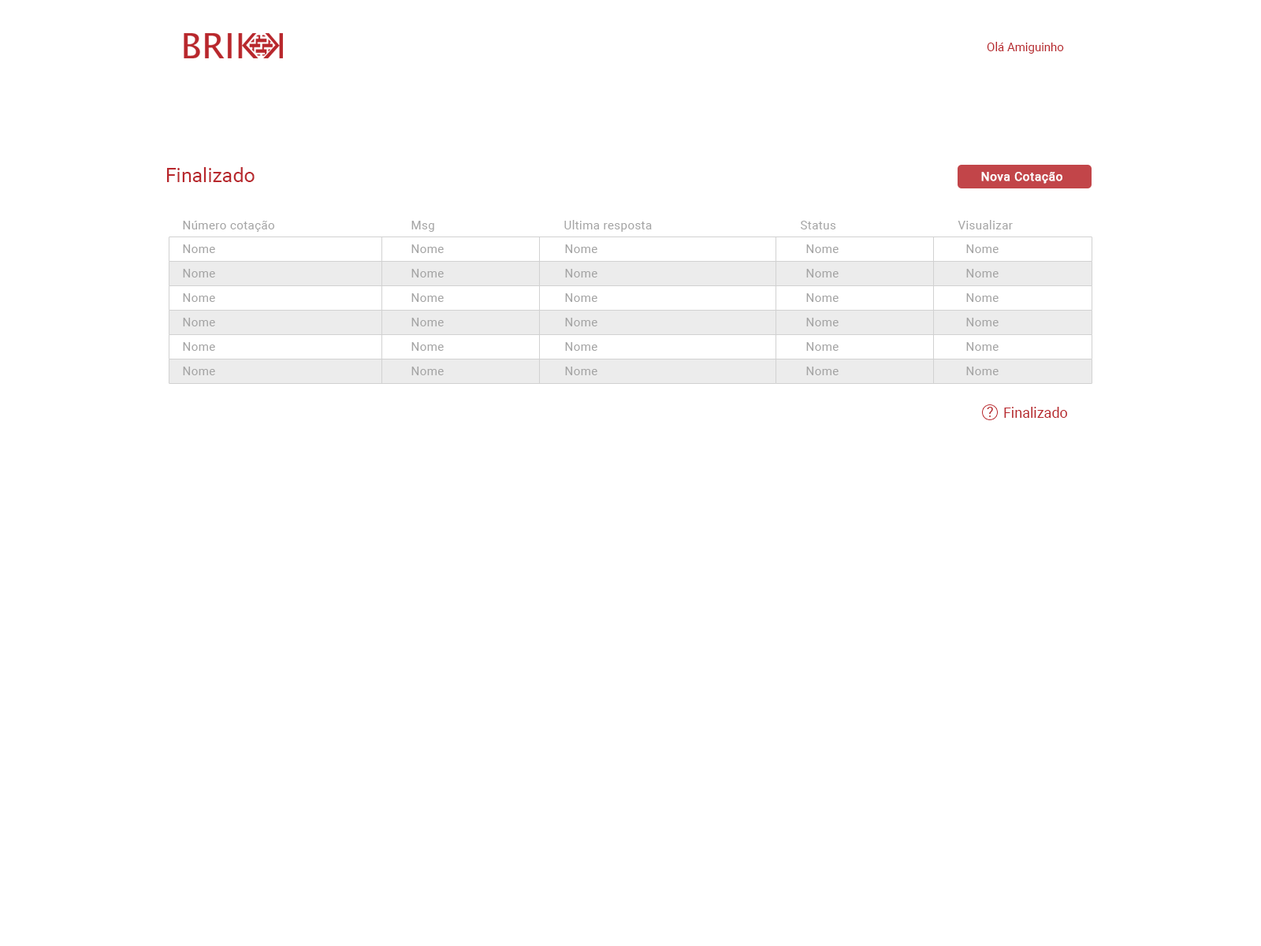
<style>
.page{position:relative;width:1261px;height:946px;background:#ffffff}
.page>*{position:absolute;margin:0}
.t1{font:11.8px "Roboto-Regular";color:#b8272c}
.t2{font:19.7px "Roboto-Regular";color:#b8272c}
.t3{font:11.8px "Roboto-Regular";letter-spacing:0.03em;color:#ffffff;font-weight:bold}
.t4{font:11.8px "Roboto-Regular";letter-spacing:0.03em;color:#a4a4a4}
.t5{font:14.2px "Roboto-Regular";color:#b8272c}
</style>
<div class="page">
<p class="t1" style="left:987px;top:42px;width:77px;height:12px">Olá Amiguinho</p>
<p class="t2" style="left:167px;top:167px;width:88px;height:15px">Finalizado</p>
<p class="t3" style="left:981px;top:172px;width:81px;height:12px">Nova Cotação</p>
<p class="t4" style="left:183px;top:221px;width:91px;height:11px">Número cotação</p>
<p class="t4" style="left:411px;top:221px;width:23px;height:11px">Msg</p>
<p class="t4" style="left:564px;top:220px;width:88px;height:12px">Ultima resposta</p>
<p class="t4" style="left:801px;top:221px;width:35px;height:8px">Status</p>
<p class="t4" style="left:958px;top:220px;width:55px;height:9px">Visualizar</p>
<p class="t4" style="left:183px;top:244px;width:32px;height:9px">Nome</p>
<p class="t4" style="left:411px;top:244px;width:33px;height:9px">Nome</p>
<p class="t4" style="left:565px;top:244px;width:32px;height:9px">Nome</p>
<p class="t4" style="left:806px;top:244px;width:33px;height:9px">Nome</p>
<p class="t4" style="left:966px;top:244px;width:32px;height:9px">Nome</p>
<p class="t4" style="left:183px;top:269px;width:32px;height:8px">Nome</p>
<p class="t4" style="left:411px;top:269px;width:33px;height:8px">Nome</p>
<p class="t4" style="left:565px;top:269px;width:32px;height:8px">Nome</p>
<p class="t4" style="left:806px;top:269px;width:33px;height:8px">Nome</p>
<p class="t4" style="left:966px;top:269px;width:32px;height:8px">Nome</p>
<p class="t4" style="left:183px;top:293px;width:32px;height:9px">Nome</p>
<p class="t4" style="left:411px;top:293px;width:33px;height:9px">Nome</p>
<p class="t4" style="left:565px;top:293px;width:32px;height:9px">Nome</p>
<p class="t4" style="left:806px;top:293px;width:33px;height:9px">Nome</p>
<p class="t4" style="left:966px;top:293px;width:32px;height:9px">Nome</p>
<p class="t4" style="left:183px;top:318px;width:32px;height:8px">Nome</p>
<p class="t4" style="left:411px;top:318px;width:33px;height:8px">Nome</p>
<p class="t4" style="left:565px;top:318px;width:32px;height:8px">Nome</p>
<p class="t4" style="left:806px;top:318px;width:33px;height:8px">Nome</p>
<p class="t4" style="left:966px;top:318px;width:32px;height:8px">Nome</p>
<p class="t4" style="left:183px;top:342px;width:32px;height:9px">Nome</p>
<p class="t4" style="left:411px;top:342px;width:33px;height:9px">Nome</p>
<p class="t4" style="left:565px;top:342px;width:32px;height:9px">Nome</p>
<p class="t4" style="left:806px;top:342px;width:33px;height:9px">Nome</p>
<p class="t4" style="left:966px;top:342px;width:32px;height:9px">Nome</p>
<p class="t4" style="left:183px;top:366px;width:32px;height:9px">Nome</p>
<p class="t4" style="left:411px;top:366px;width:33px;height:9px">Nome</p>
<p class="t4" style="left:565px;top:366px;width:32px;height:9px">Nome</p>
<p class="t4" style="left:806px;top:366px;width:33px;height:9px">Nome</p>
<p class="t4" style="left:966px;top:366px;width:32px;height:9px">Nome</p>
<p class="t5" style="left:987px;top:407px;width:6px;height:10px">?</p>
<p class="t5" style="left:1004px;top:407px;width:63px;height:11px">Finalizado</p>
</div>
